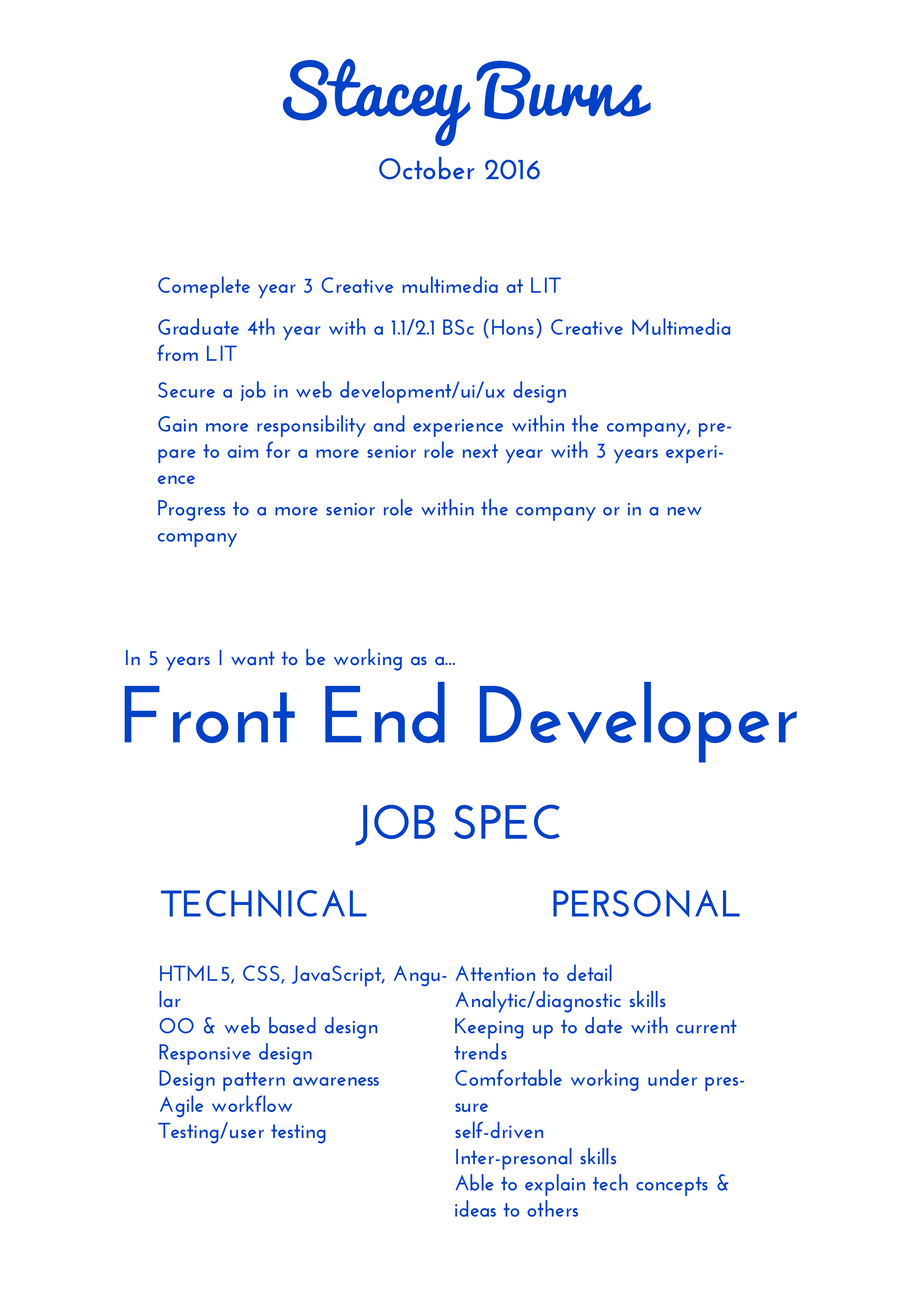
<style>
.page{position:relative;width:918px;height:1299px;background:#ffffff}
.page>*{position:absolute;margin:0}
.t1{font:65.4px "Pacifico";color:#0042c7}
.t2{font:29.4px "JosefinSans-Bold";color:#0042c7}
.t3{font:21.8px "JosefinSans-Bold";color:#0042c7}
.t4{font:80.7px "JosefinSans-Bold";color:#0042c7}
.t5{font:48px "JosefinSans-Bold";color:#0042c7}
.t6{font:37.1px "JosefinSans-Bold";color:#0042c7}
</style>
<div class="page">
<p class="t1" style="left:283px;top:59px;width:368px;height:121px;text-align:center">Stacey Burns<br><br><span class="t2">October 2016</span></p>
<p class="t3" style="left:158px;top:276px;width:403px;height:22px">Comeplete year 3 Creative multimedia at LIT</p>
<p class="t3" style="left:157px;top:318px;width:574px;height:43px">Graduate 4th year with a 1.1/2.1 BSc (Hons) Creative Multimedia from LIT</p>
<p class="t3" style="left:158px;top:381px;width:408px;height:22px">Secure a job in web development/ui/ux design</p>
<p class="t3" style="left:158px;top:415px;width:573px;height:69px">Gain more responsibility and experience within the company, prepare to aim for a more senior role next year with 3 years experience</p>
<p class="t3" style="left:158px;top:499px;width:544px;height:48px">Progress to a more senior role within the company or in a new company</p>
<p class="t3" style="left:126px;top:648px;width:329px;height:22px">In 5 years I want to be working as a...</p>
<p class="t4" style="left:125px;top:682px;width:672px;height:80px">Front End Developer</p>
<p class="t5" style="left:356px;top:804px;width:204px;height:41px">JOB SPEC</p>
<p class="t6" style="left:161px;top:889px;width:205px;height:28px">TECHNICAL</p>
<p class="t6" style="left:554px;top:889px;width:186px;height:28px">PERSONAL</p>
<p class="t3" style="left:158px;top:965px;width:289px;height:178px">HTML5, CSS, JavaScript, Angular<br>OO &amp; web based design<br>Responsive design<br>Design pattern awareness<br>Agile workflow<br>Testing/user testing</p>
<p class="t3" style="left:455px;top:964px;width:289px;height:252px">Attention to detail<br>Analytic/diagnostic skills<br>Keeping up to date with current trends<br>Comfortable working under pressure<br>self-driven<br>Inter-presonal skills<br>Able to explain tech concepts &amp; ideas to others</p>
</div>
